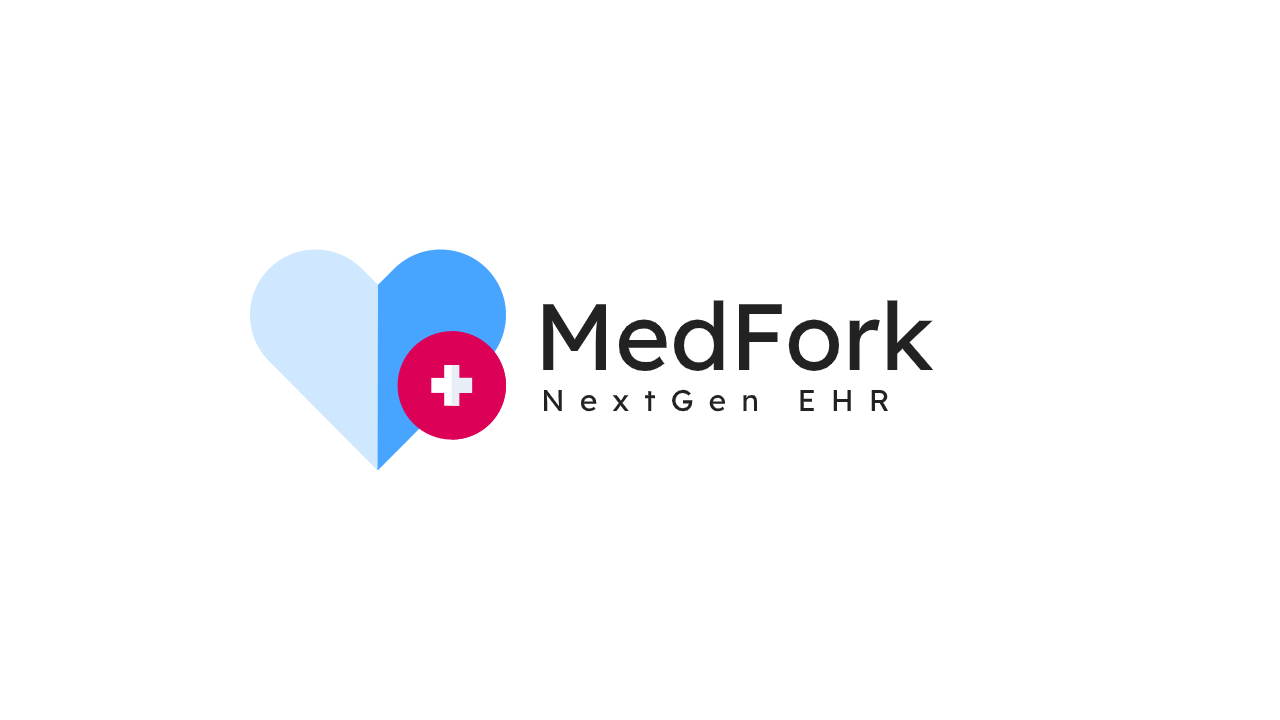
<style>
.page{position:relative;width:1280px;height:720px;background:#ffffff}
.page>*{position:absolute;margin:0}
.t1{font:94px "LexendDeca-Regular";color:#222222}
.t2{font:30px "LexendDeca-Regular";letter-spacing:0.5em;color:#222222}
</style>
<div class="page">
<p class="t1" style="left:543px;top:300px;width:391px;height:71px">MedFork</p>
<p class="t2" style="left:543px;top:389px;width:346px;height:23px">NextGen EHR</p>
</div>
